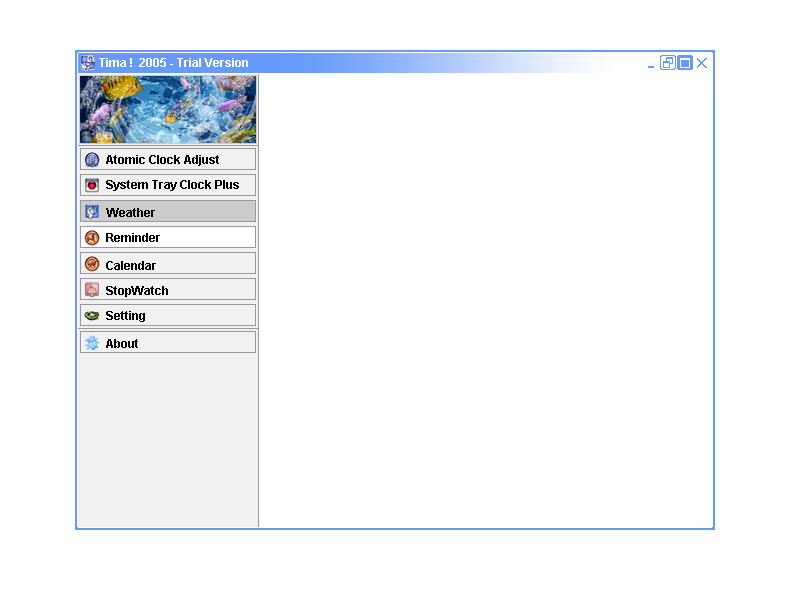
<style>
.page{position:relative;width:800px;height:600px;background:#ffffff}
.page>*{position:absolute;margin:0}
.t1{font:12px "Arial-BoldMT";color:#ffffff}
.t2{font:12px "Arial-BoldMT";color:#000000}
</style>
<div class="page">
<p class="t1" style="left:99px;top:58px;width:149px;height:9px">Tima !  2005 - Trial Version</p>
<p class="t2" style="left:106px;top:155px;width:113px;height:11px">Atomic Clock Adjust</p>
<p class="t2" style="left:106px;top:180px;width:133px;height:11px">System Tray Clock Plus</p>
<p class="t2" style="left:106px;top:208px;width:49px;height:9px">Weather</p>
<p class="t2" style="left:106px;top:233px;width:54px;height:9px">Reminder</p>
<p class="t2" style="left:106px;top:261px;width:50px;height:9px">Calendar</p>
<p class="t2" style="left:106px;top:286px;width:62px;height:11px">StopWatch</p>
<p class="t2" style="left:106px;top:311px;width:39px;height:11px">Setting</p>
<p class="t2" style="left:106px;top:339px;width:32px;height:9px">About</p>
</div>
